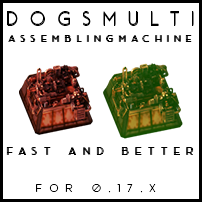
<style>
.page{position:relative;width:202px;height:202px;background:#ffffff}
.page>*{position:absolute;margin:0}
.t1{font:20.1px "AceSansDemo";letter-spacing:0.58em;color:#000000}
.t2{font:10.1px "AceSansDemo";letter-spacing:0.58em;color:#000000}
.t3{font:11.6px "AceSansDemo";letter-spacing:0.58em;color:#000000}
.t4{font:12px "AceSansDemo";letter-spacing:0.58em;color:#000000}
</style>
<div class="page">
<p class="t1" style="left:7px;top:11px;width:187px;height:14px">DOGSMULTI</p>
<p class="t1" style="left:7px;top:12px;width:187px;height:14px">DOGSMULTI</p>
<p class="t2" style="left:8px;top:35px;width:183px;height:8px">assemblingmachine</p>
<p class="t2" style="left:9px;top:35px;width:183px;height:8px">assemblingmachine</p>
<p class="t3" style="left:6px;top:147px;width:187px;height:8px">FAST and better</p>
<p class="t3" style="left:7px;top:147px;width:187px;height:8px">FAST and better</p>
<p class="t4" style="left:36px;top:184px;width:120px;height:9px">FOR 0.17.X</p>
</div>
